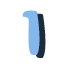
<style>
.page{position:relative;width:64px;height:64px;background:#ffffff}
.page>*{position:absolute;margin:0}
.t1{font:66px "Samba";color:#84b7eb}
.t2{font:66px "Samba"}
</style>
<div class="page">
<p class="t1" style="left:22px;top:10px;width:18px;height:45px">1</p>
<p class="t2" style="left:28px;top:13px;width:18px;height:45px">1</p>
</div>
